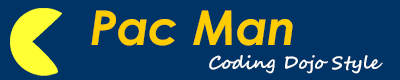
<style>
.page{position:relative;width:400px;height:80px;background:#003366}
.page>*{position:absolute;margin:0}
.t1{font:48px "CenturyGothic-BoldItalic";color:#ffcc00}
.t2{font:18px "SegoeScript-Bold";color:#ffffff}
</style>
<div class="page">
<p class="t1" style="left:91px;top:10px;width:202px;height:36px">Pac Man</p>
<p class="t2" style="left:209px;top:55px;width:174px;height:19px">Coding Dojo Style</p>
</div>
